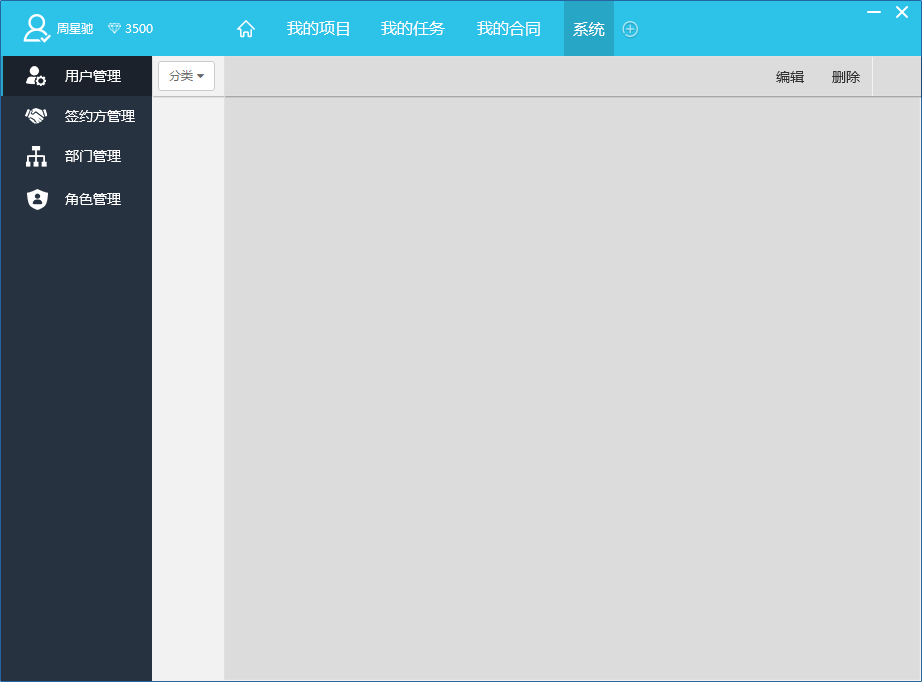
<style>
.page{position:relative;width:922px;height:682px;background:#dcdcdc}
.page>*{position:absolute;margin:0}
.t1{font:12px "MicrosoftYaHei";color:#ffffff}
.t2{font:16px "MicrosoftYaHei";color:#ffffff}
.t3{font:14px "MicrosoftYaHei";color:#ffffff}
.t4{font:14px "MicrosoftYaHei";color:#313131}
</style>
<div class="page">
<p class="t1" style="left:57px;top:23px;width:96px;height:11px">周星驰        3500</p>
<p class="t2" style="left:287px;top:21px;width:62px;height:15px">我的项目</p>
<p class="t2" style="left:381px;top:21px;width:64px;height:15px">我的任务</p>
<p class="t2" style="left:477px;top:21px;width:63px;height:15px">我的合同</p>
<p class="t2" style="left:573px;top:22px;width:32px;height:14px">系统</p>
<p class="t3" style="left:65px;top:70px;width:56px;height:12px">用户管理</p>
<p class="t4" style="left:776px;top:71px;width:28px;height:12px">编辑</p>
<p class="t4" style="left:832px;top:71px;width:28px;height:12px">删除</p>
<p class="t3" style="left:65px;top:110px;width:70px;height:12px">签约方管理</p>
<p class="t3" style="left:65px;top:150px;width:56px;height:12px">部门管理</p>
<p class="t3" style="left:65px;top:193px;width:56px;height:12px">角色管理</p>
</div>
